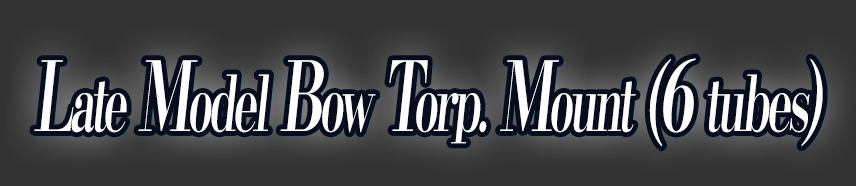
<style>
.page{position:relative;width:856px;height:186px;background:#333333}
.page>*{position:absolute;margin:0}
.t1{font:76.8px "KochoStd-Heavy";letter-spacing:-0.08em;color:#ffffff;font-style:italic;scale:0.59 1}
.t2{font:96px "KochoStd-Heavy";letter-spacing:-0.08em;color:#ffffff;font-style:italic;scale:0.59 1}
</style>
<div class="page">
<p class="t1" style="left:34px;top:58px;width:789px;height:89px"><span class="t2">L</span>ate<span class="t2"> M</span>odel<span class="t2"> B</span>ow<span class="t2"> T</span>orp.<span class="t2"> M</span>ount<span class="t2"> (6 </span>tubes<span class="t2">)</span></p>
</div>
